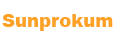
<style>
.page{position:relative;width:113px;height:40px;background:#ffffff}
.page>*{position:absolute;margin:0}
.t1{font:18px "Arial-Black";color:#ffa126}
</style>
<div class="page">
<p class="t1" style="left:2px;top:14px;width:111px;height:17px">Sunprokum</p>
</div>
